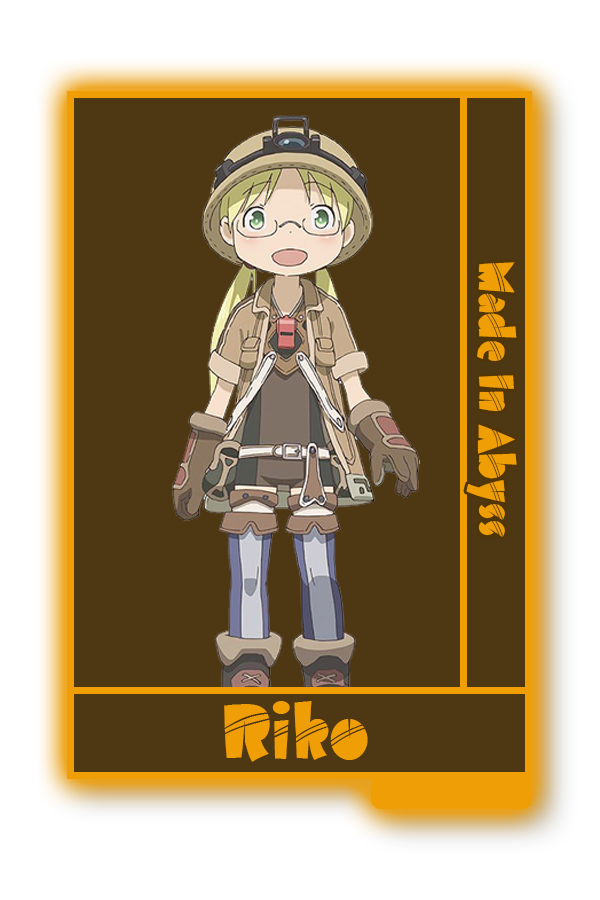
<style>
.page{position:relative;width:600px;height:900px;background:#4e3713}
.page>*{position:absolute;margin:0}
.t1{font:48.8px "AirmoleStripe";color:#f09e06}
.t2{font:75px "AirmoleStripe";color:#f09e06}
</style>
<div class="page">
<p class="t1" style="left:466px;top:262px;width:51px;height:275px;rotate:90deg">Made In Abyss</p>
<p class="t2" style="left:224px;top:701px;width:144px;height:61px">Riko</p>
</div>
